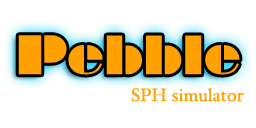
<style>
.page{position:relative;width:256px;height:128px;background:#ffffff}
.page>*{position:absolute;margin:0}
.t1{font:50.3px "Braggadocio";color:#ffa100}
.t2{font:18px "HoeflerText-Regular";color:#ffa100}
</style>
<div class="page">
<p class="t1" style="left:18px;top:35px;width:222px;height:40px">Pebble</p>
<p class="t2" style="left:131px;top:87px;width:113px;height:15px">SPH simulator</p>
</div>
